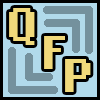
<style>
.page{position:relative;width:100px;height:100px;background:#b1daeb}
.page>*{position:absolute;margin:0}
.t1{font:50px "LoRes12OT-Bold";letter-spacing:0.07em;color:#f0d97b}
</style>
<div class="page">
<p class="t1" style="left:9px;top:8px;width:26px;height:37px">Q</p>
<p class="t1" style="left:44px;top:36px;width:21px;height:33px">F</p>
<p class="t1" style="left:65px;top:59px;width:26px;height:33px">P</p>
</div>
